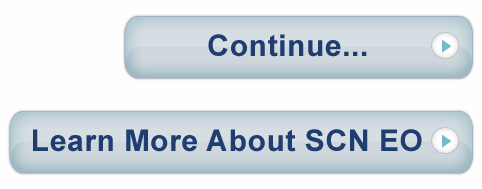
<style>
.page{position:relative;width:482px;height:189px;background:#fefefe}
.page>*{position:absolute;margin:0}
.t1{font:30px "Arial-BoldMT";letter-spacing:0.02em;color:#203d70}
</style>
<div class="page">
<p class="t1" style="left:208px;top:34px;width:159px;height:23px">Continue...</p>
<p class="t1" style="left:33px;top:129px;width:389px;height:23px">Learn More About SCN EO</p>
</div>
